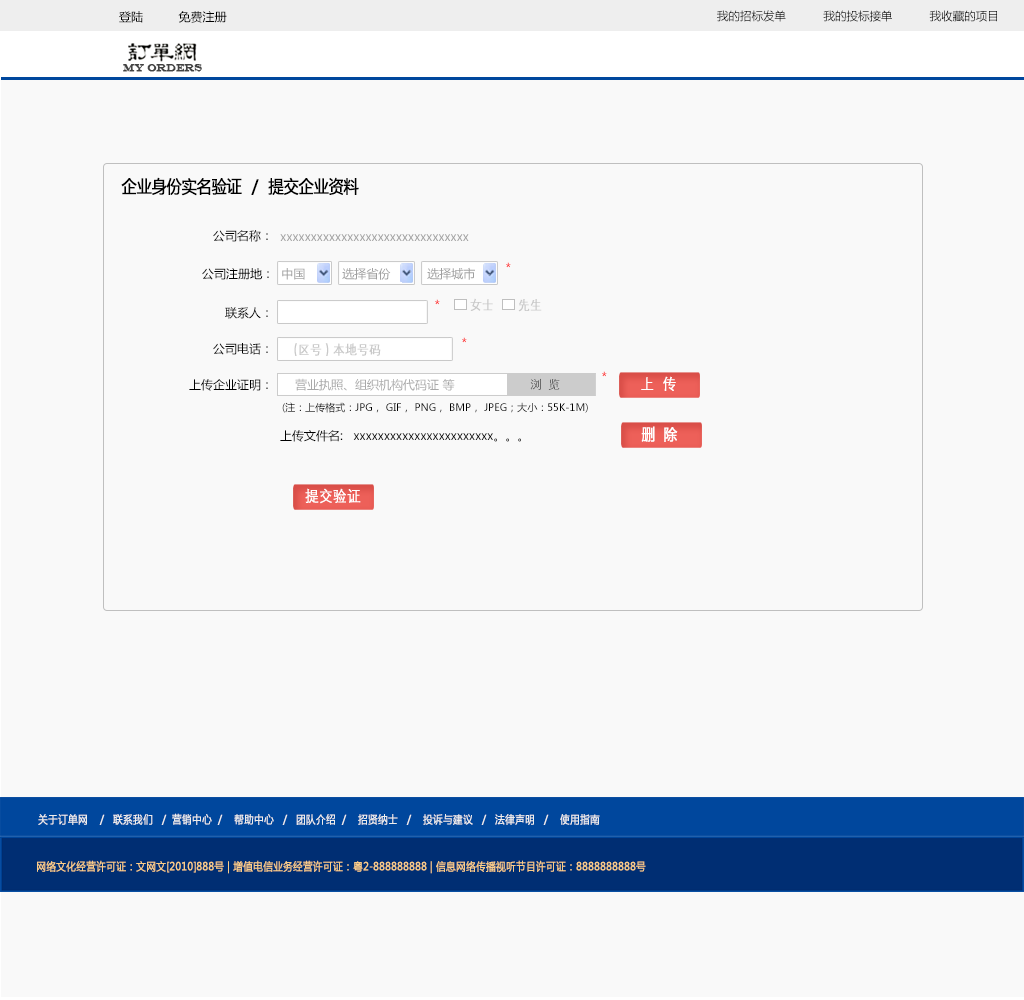
<style>
.page{position:relative;width:1024px;height:1000px;background:#f9f9f9}
.page>*{position:absolute;margin:0}
.t1{font:12px "MicrosoftYaHei";color:#000000}
.t2{font:11.5px "MicrosoftYaHei";color:#000000}
.t3{font:11px "EngraversMT";color:#434343;font-variant:small-caps;font-weight:bold;scale:0.86 1}
.t4{font:17.4px "MicrosoftYaHei";color:#000000;font-variant:small-caps;font-weight:bold;scale:0.86 1}
.t5{font:12px "MicrosoftYaHei";color:#a0a0a0}
.t6{font:12px "MicrosoftYaHei"}
.t7{font:13.2px "STXihei";color:#c9c9c9;font-variant:small-caps;font-weight:bold;scale:0.86 1}
.t8{font:15.4px "STXihei";color:#ffffff;font-variant:small-caps;font-weight:bold;scale:0.86 1}
.t9{font:12px "MicrosoftYaHei";color:#a9a9a9}
.t10{font:12px "STXihei"}
.t11{font:10px "MicrosoftYaHei";color:#000000}
.t12{font:15.4px "MicrosoftYaHei";color:#ffffff;font-variant:small-caps;font-weight:bold;scale:0.86 1}
.t13{font:11px "MicrosoftYaHei";color:#eeeeee;font-variant:small-caps;font-weight:bold;scale:0.86 1}
.t14{font:15.4px "STXihei";color:#eeeeee;font-variant:small-caps;font-weight:bold;scale:0.86 1}
.t15{font:11px "MicrosoftYaHei";color:#facd89;font-variant:small-caps;font-weight:bold;scale:0.87 1}
.t16{font:11px "MicrosoftYaHei";color:#eeeeee;font-variant:small-caps;font-weight:bold;scale:0.87 1}
</style>
<div class="page">
<p class="t1" style="left:119px;top:11px;width:108px;height:12px">登陆          免费注册</p>
<p class="t2" style="left:717px;top:10px;width:280px;height:12px">我的招标发单           我的投标接单           我收藏的项目</p>
<p class="t3" style="left:123px;top:64px;width:79px;height:8px">MY ORDERS</p>
<p class="t4" style="left:121px;top:177px;width:238px;height:19px">企业身份实名验证  /  提交企业资料</p>
<p class="t1" style="left:213px;top:230px;width:55px;height:12px">公司名称：</p>
<p class="t5" style="left:280px;top:234px;width:189px;height:7px">xxxxxxxxxxxxxxxxxxxxxxxxxxxxxxx</p>
<p class="t1" style="left:202px;top:268px;width:67px;height:12px">公司注册地：</p>
<p class="t5" style="left:282px;top:268px;width:23px;height:12px">中国</p>
<p class="t5" style="left:342px;top:268px;width:49px;height:12px">选择省份</p>
<p class="t5" style="left:427px;top:267px;width:48px;height:13px">选择城市</p>
<p class="t6" style="left:506px;top:262px;width:5px;height:6px">*</p>
<p class="t6" style="left:435px;top:299px;width:5px;height:6px">*</p>
<p class="t7" style="left:470px;top:298px;width:72px;height:14px">女士        先生</p>
<p class="t1" style="left:225px;top:307px;width:43px;height:12px">联系人：</p>
<p class="t6" style="left:462px;top:337px;width:5px;height:6px">*</p>
<p class="t1" style="left:213px;top:343px;width:55px;height:12px">公司电话：</p>
<p class="t7" style="left:294px;top:343px;width:87px;height:13px">(区号 ) 本地号码</p>
<p class="t6" style="left:602px;top:371px;width:5px;height:6px">*</p>
<p class="t8" style="left:641px;top:376px;width:35px;height:15px">上  传</p>
<p class="t1" style="left:189px;top:379px;width:79px;height:12px">上传企业证明：</p>
<p class="t9" style="left:295px;top:378px;width:160px;height:13px">营业执照、组织机构代码证 等</p>
<p class="t10" style="left:530px;top:378px;width:30px;height:12px">浏  览</p>
<p class="t11" style="left:282px;top:402px;width:306px;height:11px"><span class="t1"><br><br> </span>(注：上传格式：JPG， GIF， PNG， BMP， JPEG；大小：55K-1M)</p>
<p class="t1" style="left:280px;top:430px;width:241px;height:12px">上传文件名:   xxxxxxxxxxxxxxxxxxxxxxx。。。</p>
<p class="t12" style="left:641px;top:426px;width:37px;height:16px">删  除</p>
<p class="t8" style="left:305px;top:488px;width:56px;height:16px">提交验证</p>
<p class="t13" style="left:38px;top:813px;width:562px;height:12px"><span class="t14"><br><br></span>关于订单网    /   联系我们   /  营销中心  /    帮助中心   /   团队介绍  /    招贤纳士   /    投诉与建议   /   法律声明   /    使用指南</p>
<p class="t15" style="left:37px;top:860px;width:609px;height:14px"><span class="t16"> </span>网络文化经营许可证：文网文[2010]888号 | 增值电信业务经营许可证：粤2-888888888 | 信息网络传播视听节目许可证：8888888888号</p>
</div>
